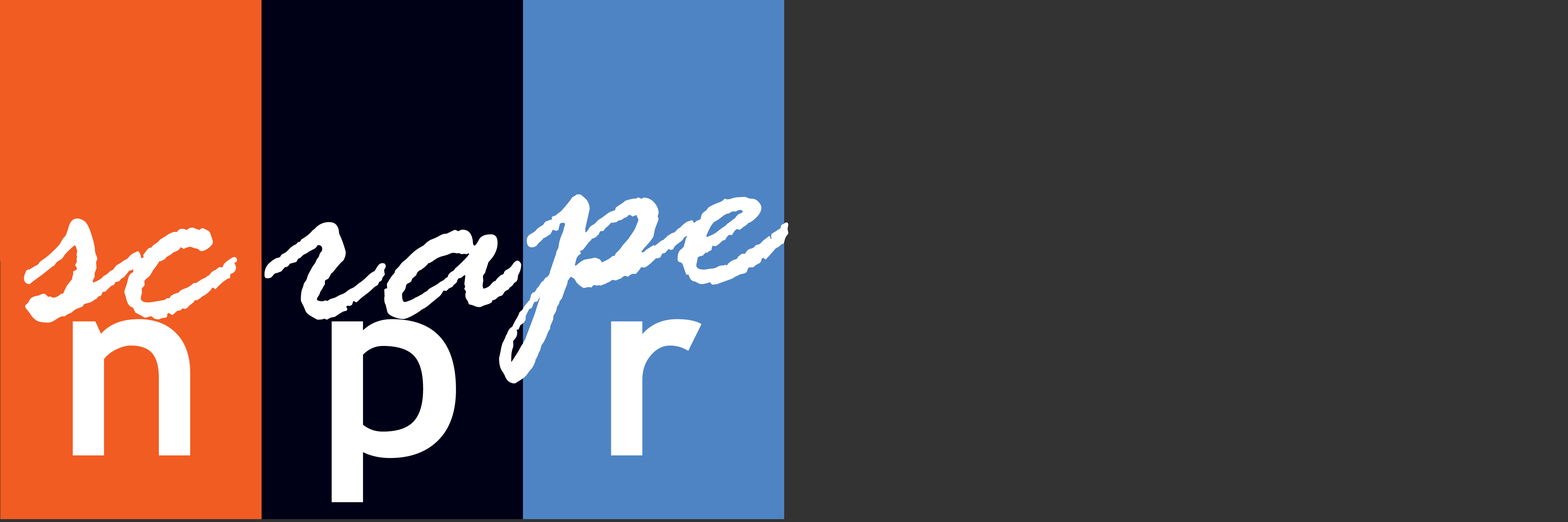
<style>
.page{position:relative;width:1568px;height:522px;background:#333333}
.page>*{position:absolute;margin:0}
.t1{font:315.2px "RageItalic";color:#ffffff}
</style>
<div class="page">
<p class="t1" style="left:499px;top:195px;width:290px;height:189px">pe</p>
<p class="t1" style="left:24px;top:219px;width:213px;height:104px">sc</p>
<p class="t1" style="left:264px;top:222px;width:257px;height:98px">ra</p>
</div>
